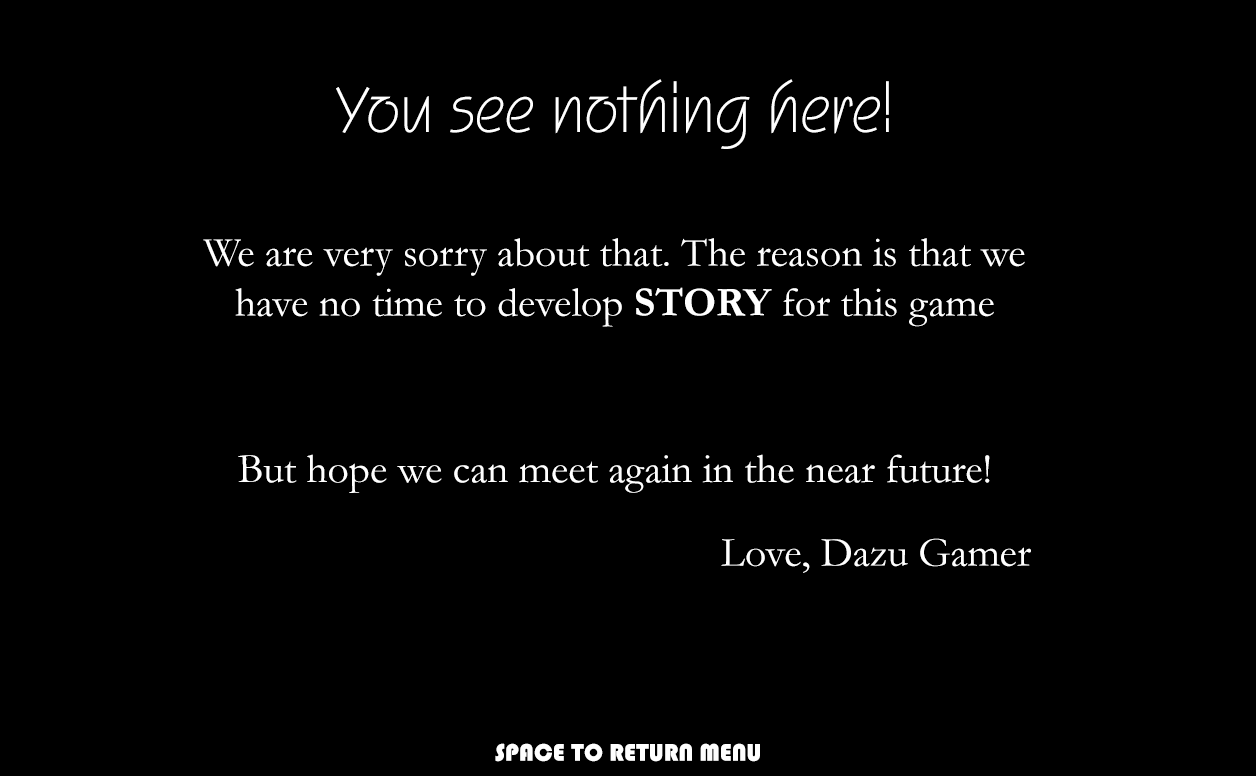
<style>
.page{position:relative;width:1256px;height:776px;background:#000000}
.page>*{position:absolute;margin:0}
.t1{font:41.7px "Garamond";color:#ffffff}
.t2{font:66.7px/83.3px "UVNGiayTrang";color:#ffffff}
.t3{font:41.7px "Garamond-Bold";color:#ffffff}
.t4{font:41.7px/83.3px "Garamond";color:#ffffff}
.t5{font:25px "Bauhaus93";color:#ffffff}
</style>
<div class="page">
<p class="t1" style="left:203px;top:79px;width:828px;height:494px;text-align:center"><span class="t2">You see nothing here!<br><br></span>We are very sorry about that. The reason is that we have no time to develop <span class="t3">STORY </span>for this game<br><br><span class="t4">But hope we can meet again in the near future!<br>Love, Dazu Gamer</span></p>
<p class="t5" style="left:495px;top:743px;width:265px;height:19px">SPACE TO RETURN MENU</p>
</div>
